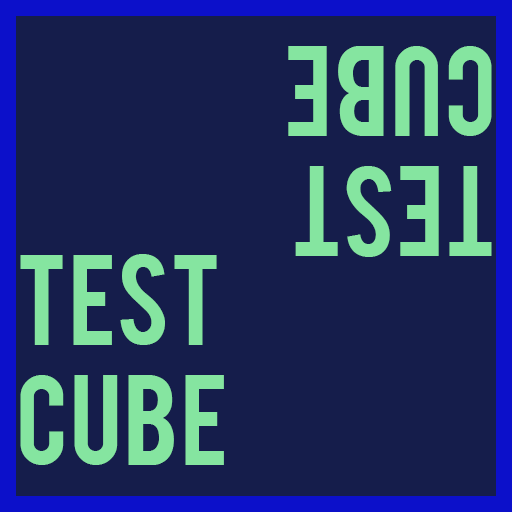
<style>
.page{position:relative;width:512px;height:512px;background:#151d4b}
.page>*{position:absolute;margin:0}
.t1{font:100px "Bebas";color:#85e5a0}
</style>
<div class="page">
<p class="t1" style="left:288px;top:46px;width:204px;height:211px;rotate:-180deg">Test<br>CUBE</p>
<p class="t1" style="left:20px;top:254px;width:204px;height:211px">Test<br>CUBE</p>
</div>
